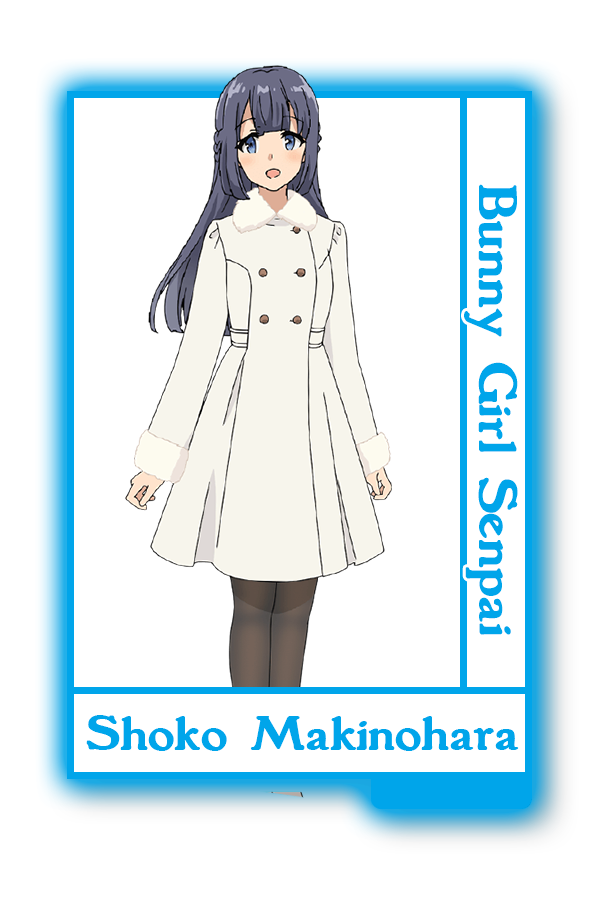
<style>
.page{position:relative;width:600px;height:900px;background:#ffffff}
.page>*{position:absolute;margin:0}
.t1{font:48.8px "Grantham-Bold";color:#0ba3e1}
.t2{font:45.6px "Grantham-Bold";color:#0ba3e1}
</style>
<div class="page">
<p class="t1" style="left:464px;top:184px;width:54px;height:451px;rotate:90deg">Bunny Girl Senpai</p>
<p class="t2" style="left:86px;top:715px;width:433px;height:36px">Shoko Makinohara</p>
</div>
